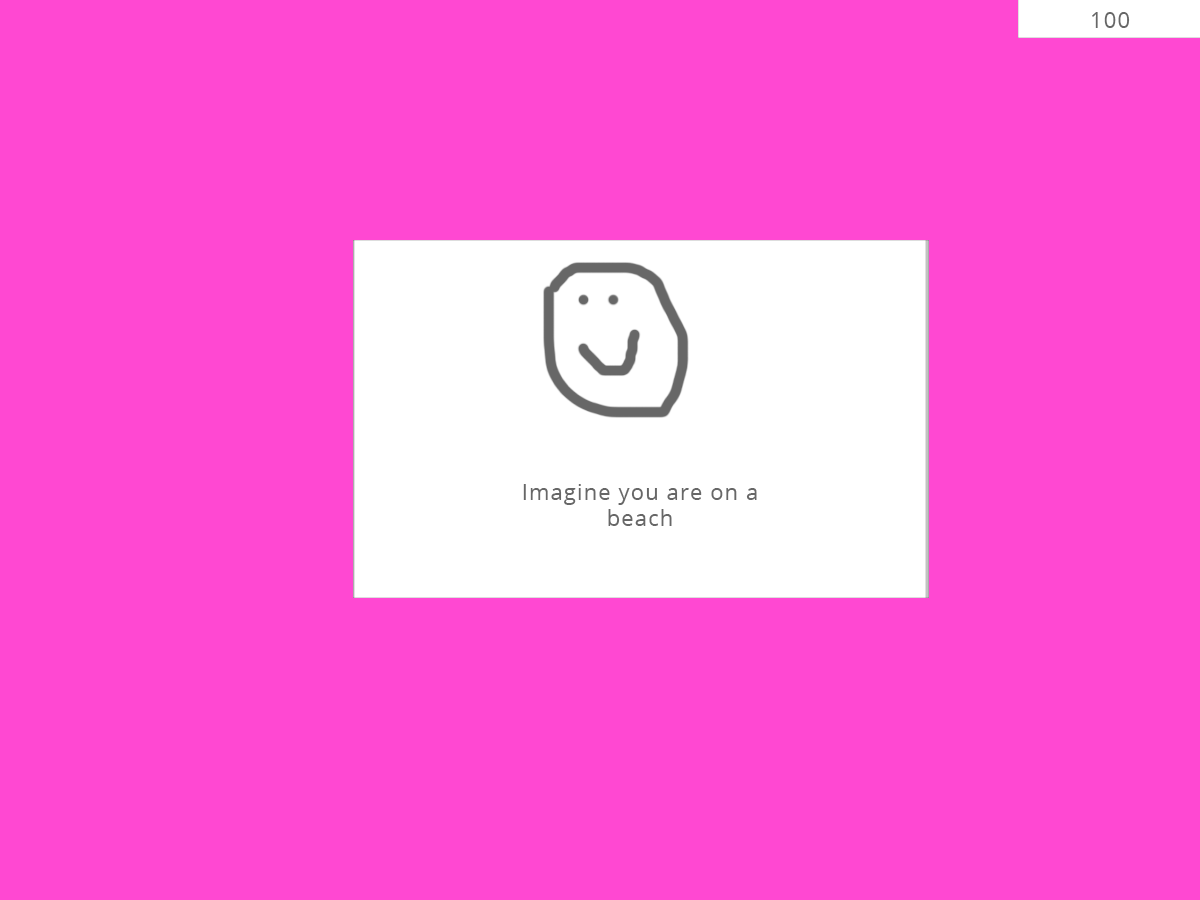
<style>
.page{position:relative;width:1200px;height:900px;background:#ff48d2}
.page>*{position:absolute;margin:0}
.t1{font:22px "OpenSans";letter-spacing:0.05em;color:#676767}
</style>
<div class="page">
<p class="t1" style="left:1092px;top:12px;width:38px;height:16px">100</p>
<p class="t1" style="left:523px;top:484px;width:234px;height:42px;text-align:center">Imagine you are on a beach</p>
</div>
